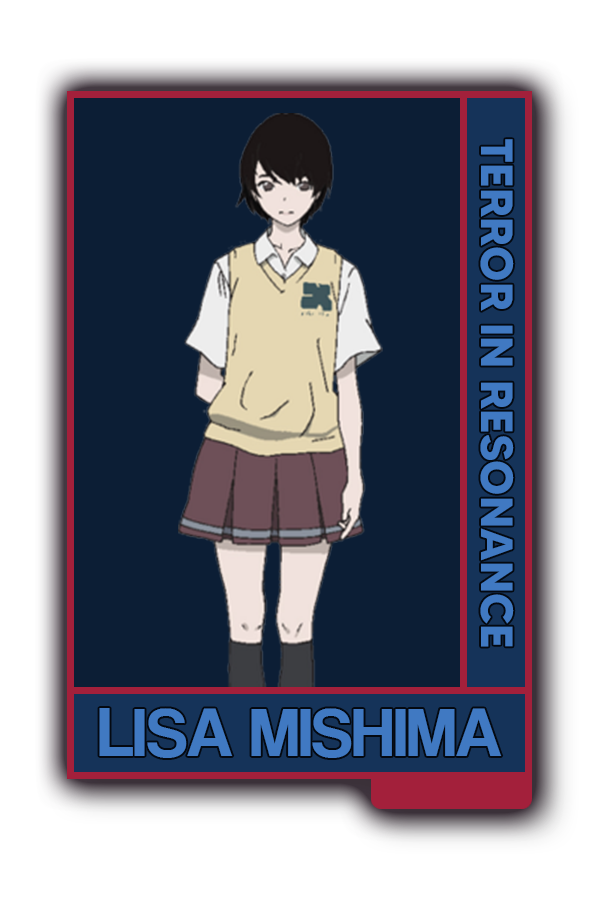
<style>
.page{position:relative;width:600px;height:900px;background:#0c1e35}
.page>*{position:absolute;margin:0}
.t1{font:45.2px "MADETOMMY-Bold";color:#4079c2}
.t2{font:71px "CoolveticaRg-Regular";color:#4079c2}
</style>
<div class="page">
<p class="t1" style="left:480px;top:139px;width:34px;height:508px;rotate:90deg">TERROR IN RESONANCE</p>
<p class="t2" style="left:99px;top:708px;width:403px;height:50px">LISA MISHIMA</p>
</div>
